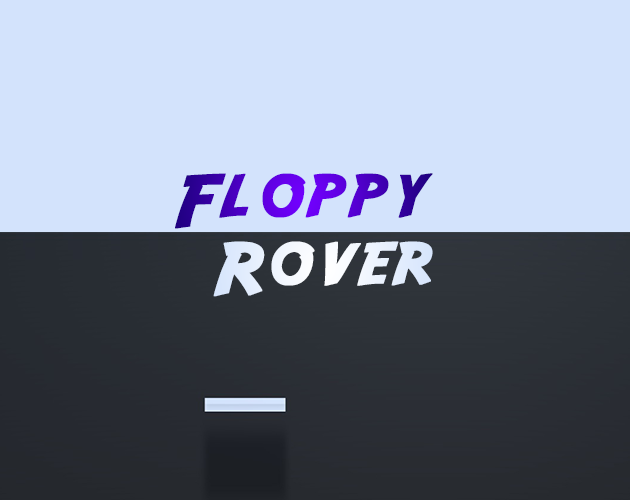
<style>
.page{position:relative;width:630px;height:500px;background:#d3e3fc}
.page>*{position:absolute;margin:0}
.t1{font:72px "Adventure";letter-spacing:0.1em;font-weight:bold}
.t2{font:72px "Adventure";letter-spacing:0.1em;color:#e8f0fd;font-weight:bold}
</style>
<div class="page">
<p class="t1" style="left:175px;top:173px;width:258px;height:56px">Floppy</p>
<p class="t2" style="left:213px;top:241px;width:220px;height:56px">Rover</p>
</div>
